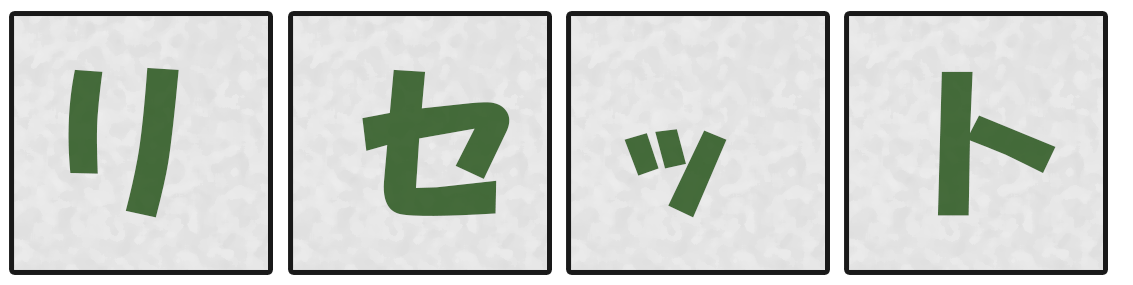
<style>
.page{position:relative;width:1133px;height:285px}
.page>*{position:absolute;margin:0}
.t1{font:166.7px "HGSoeiKakupoptai";color:#446a3a}
</style>
<div class="page">
<p class="t1" style="left:68px;top:67px;width:111px;height:151px">リ</p>
<p class="t1" style="left:362px;top:69px;width:148px;height:147px">セ</p>
<p class="t1" style="left:937px;top:71px;width:119px;height:145px">ト</p>
<p class="t1" style="left:624px;top:129px;width:103px;height:89px">ッ</p>
</div>
